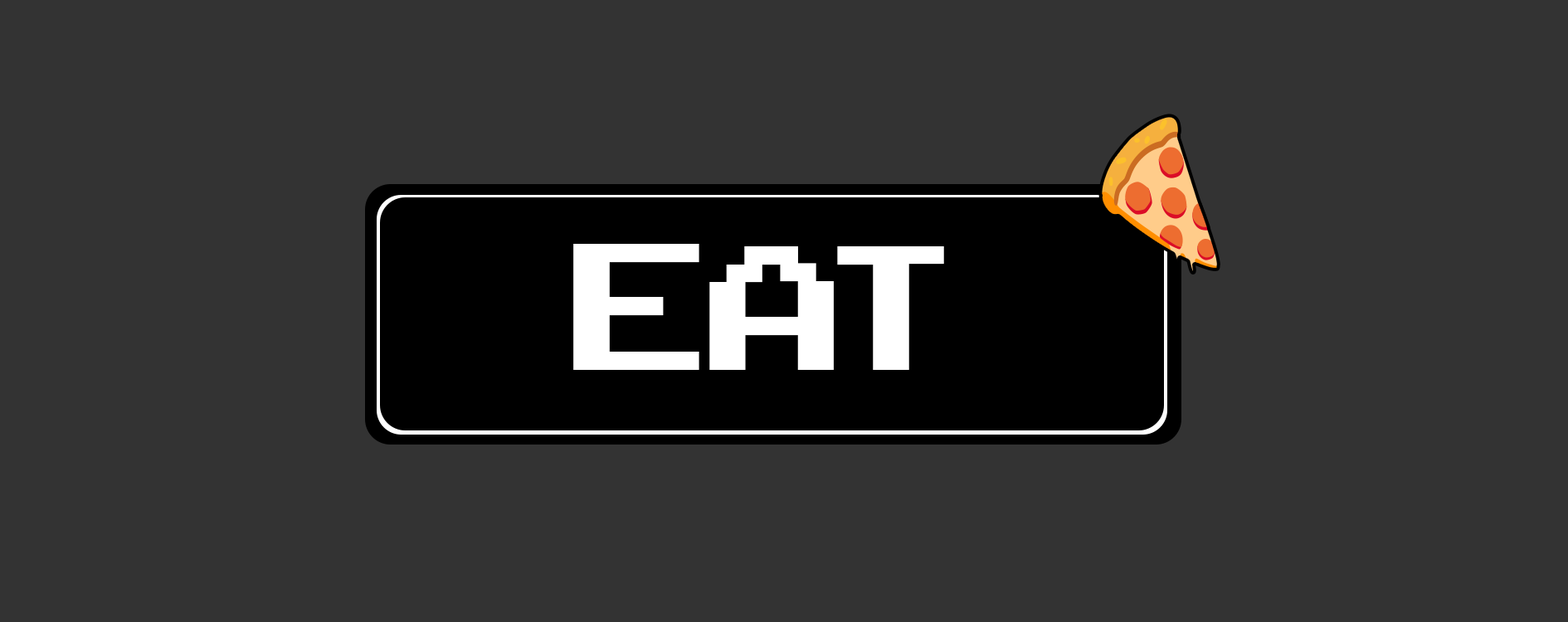
<style>
.page{position:relative;width:1568px;height:622px;background:#333333}
.page>*{position:absolute;margin:0}
.t1{font:248.9px "ArcadeClassic";color:#ffffff}
</style>
<div class="page">
<p class="t1" style="left:573px;top:244px;width:371px;height:126px">EAT</p>
</div>
